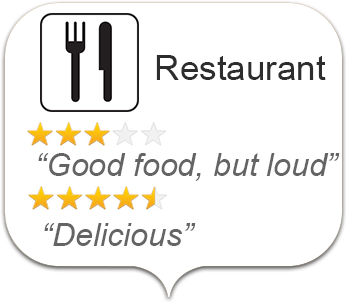
<style>
.page{position:relative;width:347px;height:303px;background:#ffffff}
.page>*{position:absolute;margin:0}
.t1{font:35px "ArialMT";color:#2d2d2d}
.t2{font:32px "Arial-ItalicMT";color:#646464}
</style>
<div class="page">
<p class="t1" style="left:156px;top:55px;width:170px;height:25px">Restaurant</p>
<p class="t2" style="left:38px;top:153px;width:302px;height:28px">“Good food, but loud”</p>
<p class="t2" style="left:44px;top:223px;width:152px;height:23px">“Delicious”</p>
</div>
